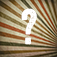
<style>
.page{position:relative;width:57px;height:57px}
.page>*{position:absolute;margin:0}
.t1{font:48px "VeneerThree";color:#ffffff}
</style>
<div class="page">
<p class="t1" style="left:21px;top:8px;width:16px;height:37px">?</p>
</div>
